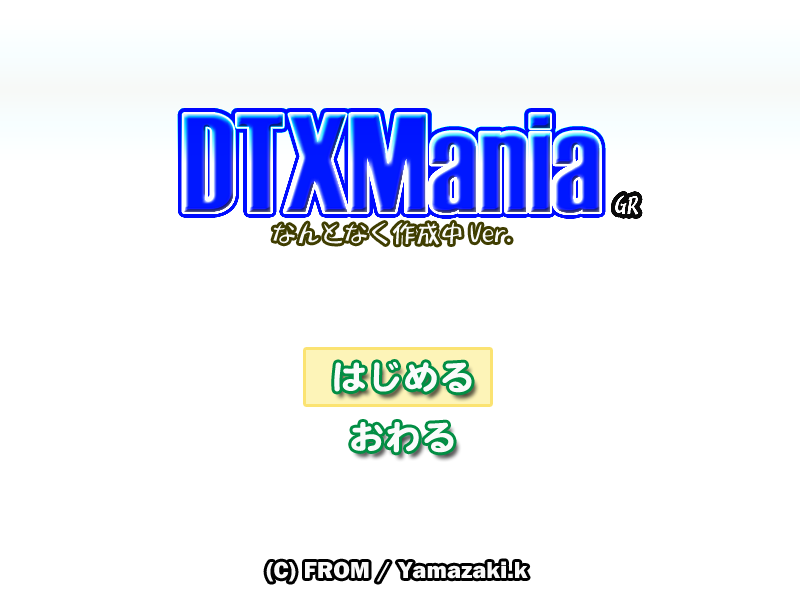
<style>
.page{position:relative;width:800px;height:600px;background:#ffffff}
.page>*{position:absolute;margin:0}
.t1{font:24px "DFFuun-W7-WIN-RKSJ-H";color:#fafbfb}
.t2{font:36px/60px "Franklin-Heavy-Jap-WINP-RKSJ-H";color:#fafbfb}
.t3{font:24px "Franklin-Heavy-Jap-WINP-RKSJ-H";color:#f9f9f9}
</style>
<div class="page">
<p class="t1" style="left:615px;top:195px;width:23px;height:20px">GR</p>
<p class="t1" style="left:273px;top:222px;width:238px;height:23px">なんとなく作成中Ver.</p>
<p class="t2" style="left:334px;top:362px;width:138px;height:91px;text-align:center">はじめる<br>おわる</p>
<p class="t3" style="left:266px;top:561px;width:262px;height:21px">(C) FROM / Yamazaki.k</p>
</div>
